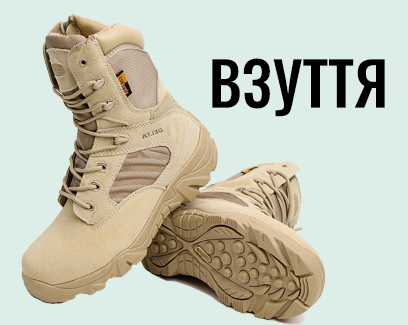
<style>
.page{position:relative;width:408px;height:325px;background:#ddeee8}
.page>*{position:absolute;margin:0}
.t1{font:60px "Oswald-Medium";color:#000000}
</style>
<div class="page">
<p class="t1" style="left:212px;top:58px;width:173px;height:59px">ВЗУТТЯ</p>
</div>
